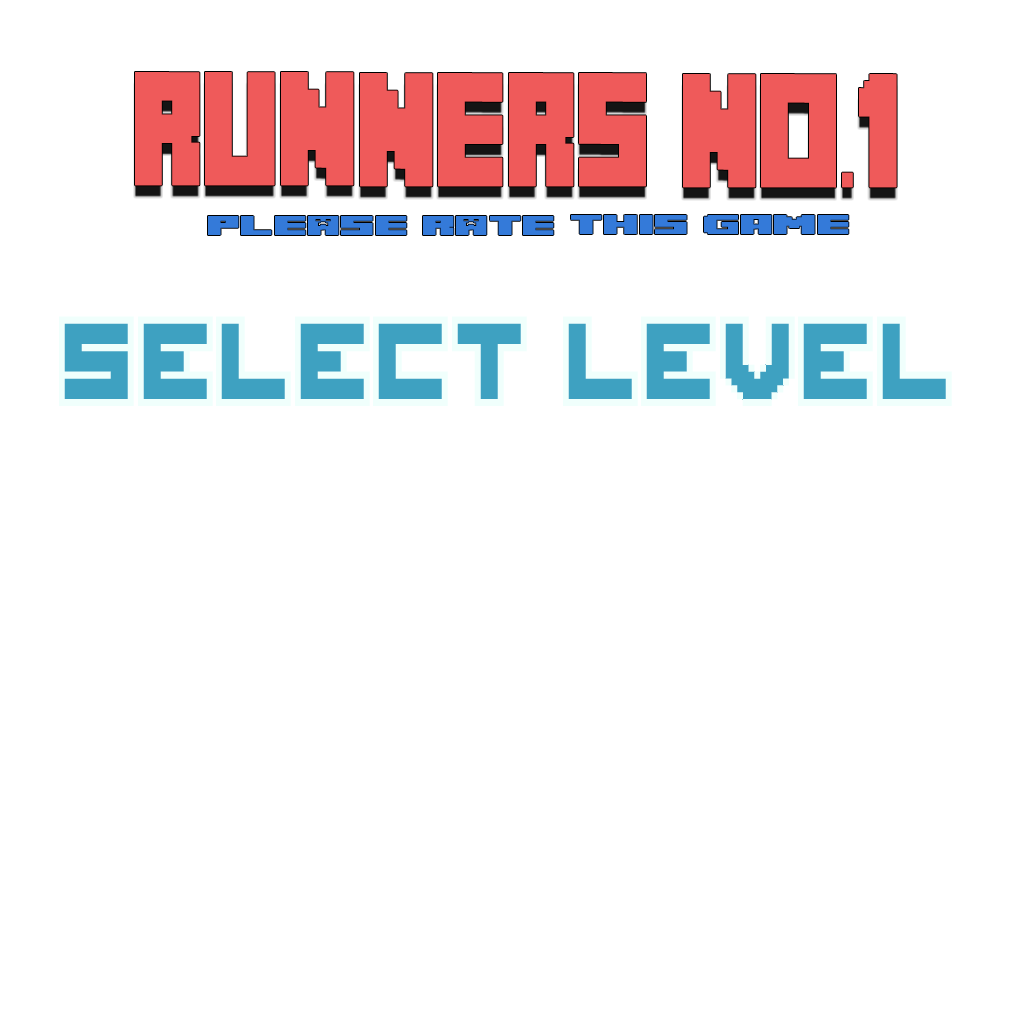
<style>
.page{position:relative;width:1024px;height:1024px;background:#ffffff}
.page>*{position:absolute;margin:0}
.t1{font:112.9px "MineCrafter-3";letter-spacing:-0.02em;color:#ef5a5a;scale:0.76 1}
.t2{font:19px "MineCrafter-3";letter-spacing:-0.02em;color:#347ad9;scale:2.12 1}
</style>
<div class="page">
<p class="t1" style="left:135px;top:72px;width:762px;height:116px">RUNNERs NO.1</p>
<p class="t2" style="left:208px;top:215px;width:641px;height:20px">pLEASE rATE this game</p>
</div>
